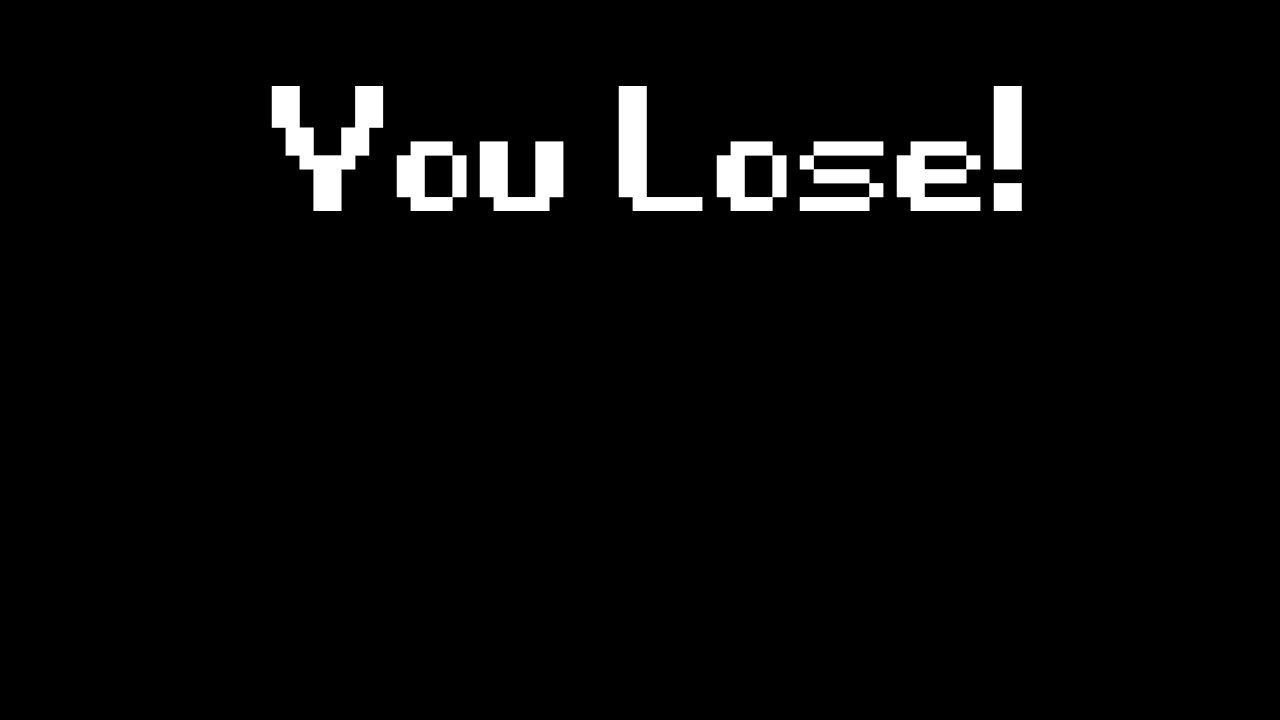
<style>
.page{position:relative;width:1280px;height:720px;background:#000000}
.page>*{position:absolute;margin:0}
.t1{font:444.4px "Game-Over";color:#ffffff}
</style>
<div class="page">
<p class="t1" style="left:271px;top:86px;width:751px;height:125px">You Lose!</p>
</div>
